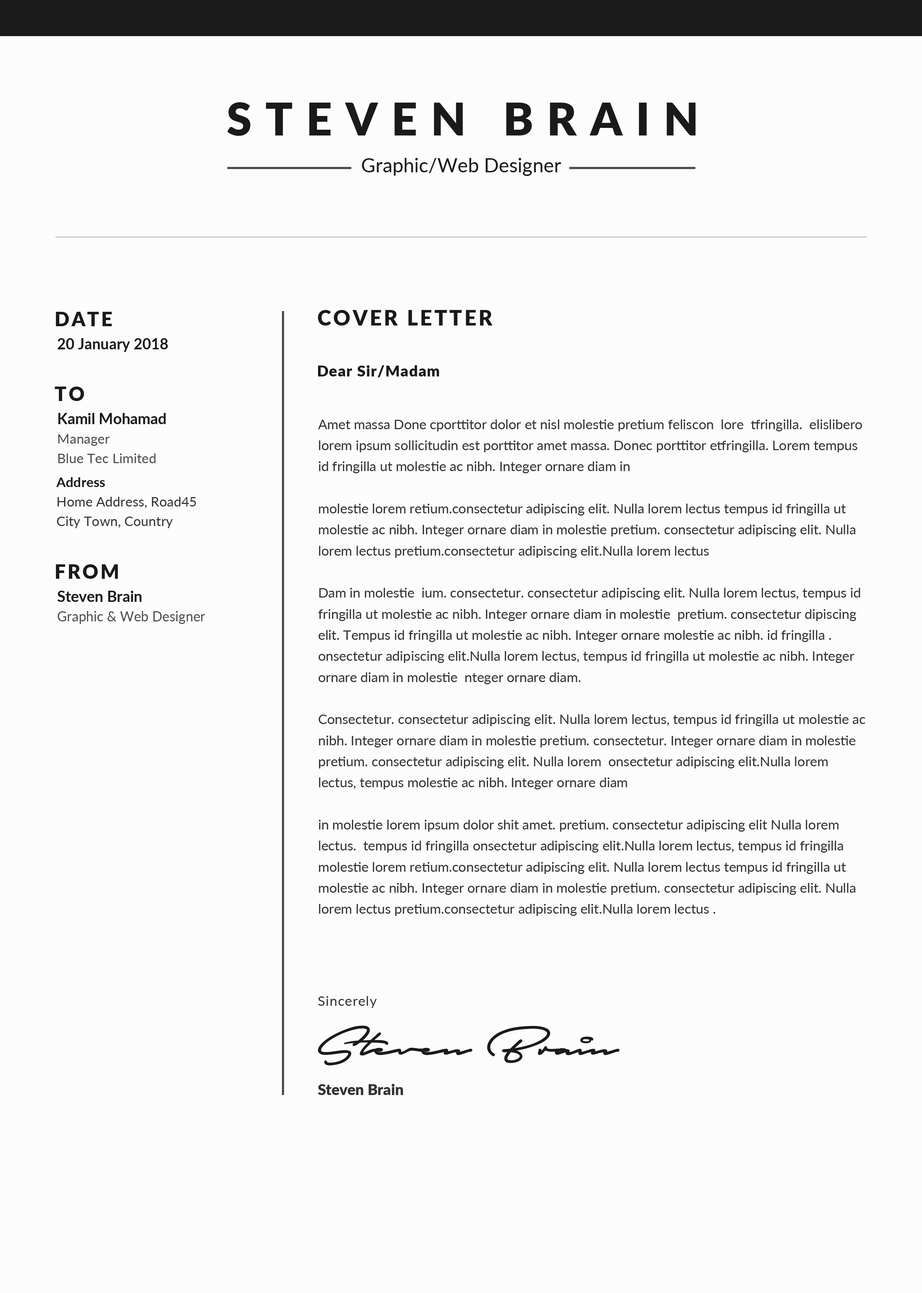
<style>
.page{position:relative;width:922px;height:1293px;background:#fcfcfc}
.page>*{position:absolute;margin:0}
.t1{font:45.2px "Lato-Black";letter-spacing:0.3em;color:#1a1a1a;text-transform:uppercase}
.t2{font:19.6px "Lato-Regular";color:#1a1a1a}
.t3{font:19.6px "Lato-Black";letter-spacing:0.1em;color:#1a1a1a;text-transform:uppercase}
.t4{font:21.1px "Lato-Black";letter-spacing:0.1em;color:#1a1a1a;text-transform:uppercase}
.t5{font:15.1px "Lato-Bold";color:#1a1a1a}
.t6{font:15.1px "Lato-Black";letter-spacing:0.05em;color:#1a1a1a}
.t7{font:13.6px/19.5px "Lato-Regular";color:#4c4c4c}
.t8{font:15px/19.5px "Lato-Bold";color:#1a1a1a}
.t9{font:13.6px/21.1px "Lato-Regular";color:#333333}
.t10{font:13.6px/19.6px "Lato-Regular";color:#333333}
.t11{font:13.6px "Lato-Bold";color:#1a1a1a}
.t12{font:13.6px/19.6px "Lato-Regular";color:#4c4c4c}
.t13{font:15px/19.6px "Lato-Bold";color:#1a1a1a}
.t14{font:13.6px "Lato-Regular";letter-spacing:0.05em;color:#333333}
.t15{font:15.1px "Lato-Black";color:#333333}
</style>
<div class="page">
<p class="t1" style="left:227px;top:102px;width:469px;height:34px">STEVEN BRAIN</p>
<p class="t2" style="left:362px;top:158px;width:199px;height:18px">Graphic/Web Designer</p>
<p class="t3" style="left:56px;top:312px;width:56px;height:14px">Date</p>
<p class="t4" style="left:318px;top:310px;width:175px;height:16px">COVER LETTER</p>
<p class="t5" style="left:57px;top:338px;width:111px;height:14px">20 January 2018</p>
<p class="t6" style="left:318px;top:365px;width:121px;height:13px">Dear Sir/Madam</p>
<p class="t3" style="left:55px;top:387px;width:29px;height:14px">TO</p>
<p class="t7" style="left:58px;top:413px;width:108px;height:50px"><span class="t8">Kamil Mohamad<br></span>Manager<br>Blue Tec Limited</p>
<p class="t9" style="left:318px;top:420px;width:548px;height:496px">Amet massa Done cporttitor dolor et nisl molestie pretium feliscon  lore  tfringilla.  elislibero lorem ipsum sollicitudin est porttitor amet massa. Donec porttitor etfringilla. Lorem tempus id fringilla ut molestie ac nibh. Integer ornare diam in<br><br>molestie lorem retium.consectetur adipiscing elit. Nulla lorem lectus tempus id fringilla ut molestie ac nibh. Integer ornare diam in molestie pretium. consectetur adipiscing elit. Nulla lorem lectus pretium.consectetur adipiscing elit.Nulla lorem lectus<br><br>Dam in molestie  ium. consectetur. consectetur adipiscing elit. Nulla lorem lectus, tempus id fringilla ut molestie ac nibh. Integer ornare diam in molestie  pretium. consectetur dipiscing elit. Tempus id fringilla ut molestie ac nibh. Integer ornare molestie ac nibh. id fringilla .  onsectetur adipiscing elit.Nulla lorem lectus, tempus id fringilla ut molestie ac nibh. Integer ornare diam in molestie  nteger ornare diam.<br><br>Consectetur. consectetur adipiscing elit. Nulla lorem lectus, tempus id fringilla ut molestie ac nibh. Integer ornare diam in molestie pretium. consectetur. Integer ornare diam in molestie pretium. consectetur adipiscing elit. Nulla lorem  onsectetur adipiscing elit.Nulla lorem lectus, tempus molestie ac nibh. Integer ornare diam<br><br>in molestie lorem ipsum dolor shit amet. pretium. consectetur adipiscing elit Nulla lorem lectus.  tempus id fringilla onsectetur adipiscing elit.Nulla lorem lectus, tempus id fringilla<br>molestie lorem retium.consectetur adipiscing elit. Nulla lorem lectus tempus id fringilla ut molestie ac nibh. Integer ornare diam in molestie pretium. consectetur adipiscing elit. Nulla lorem lectus pretium.consectetur adipiscing elit.Nulla lorem lectus .</p>
<p class="t10" style="left:56px;top:477px;width:140px;height:51px"><span class="t11">Address<br></span>Home Address, Road45<br>City Town, Country</p>
<p class="t3" style="left:56px;top:564px;width:62px;height:15px">FROM</p>
<p class="t12" style="left:57px;top:591px;width:148px;height:33px"><span class="t13">Steven Brain<br></span>Graphic &amp; Web Designer</p>
<p class="t14" style="left:318px;top:996px;width:59px;height:12px">Sincerely</p>
<p class="t15" style="left:318px;top:1084px;width:85px;height:11px">Steven Brain</p>
</div>
